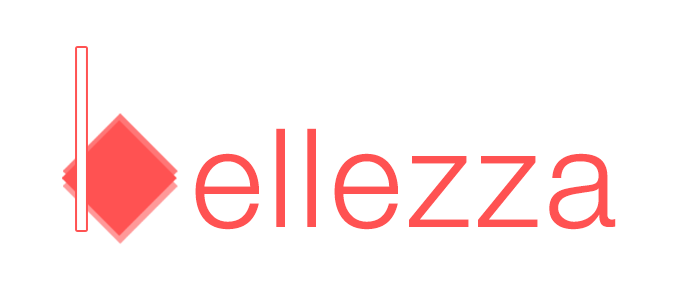
<style>
.page{position:relative;width:700px;height:300px;background:#ffffff}
.page>*{position:absolute;margin:0}
.t1{font:137.5px "HelveticaNeueLight";letter-spacing:0.04em;color:#ff5252}
</style>
<div class="page">
<p class="t1" style="left:195px;top:128px;width:421px;height:102px">ellezza</p>
</div>
